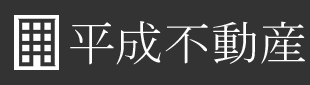
<style>
.page{position:relative;width:310px;height:85px;background:#333333}
.page>*{position:absolute;margin:0}
.t1{font:48px "MS-PMincho";color:#fefefe}
</style>
<div class="page">
<p class="t1" style="left:70px;top:21px;width:235px;height:44px">平成不動産</p>
</div>
